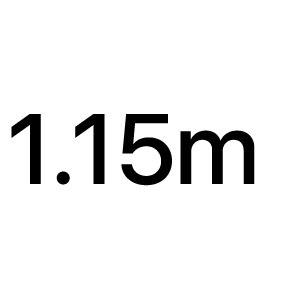
<style>
.page{position:relative;width:300px;height:300px;background:#ffffff}
.page>*{position:absolute;margin:0}
.t1{font:99px "SFUIDisplay-Medium";color:#000000}
</style>
<div class="page">
<p class="t1" style="left:11px;top:114px;width:244px;height:72px">1.15m</p>
</div>
